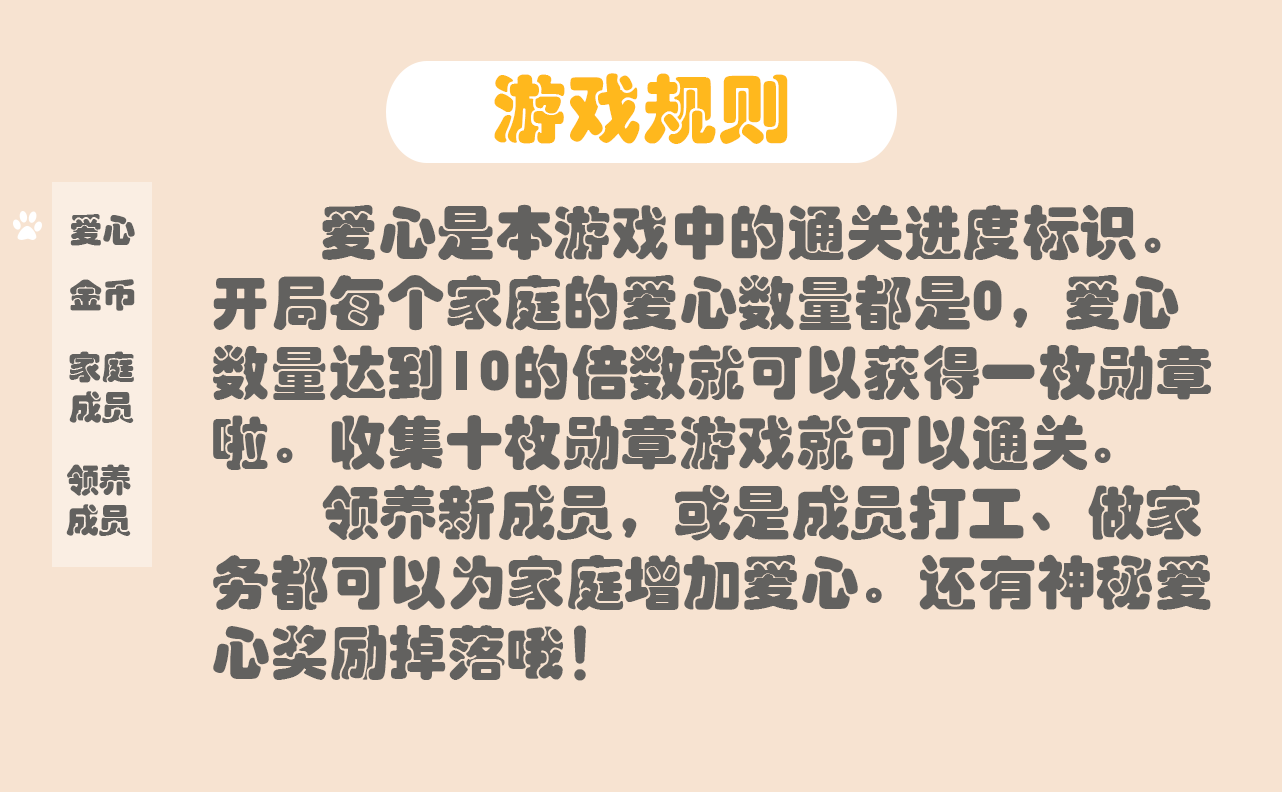
<style>
.page{position:relative;width:1282px;height:792px;background:#f7e3d1}
.page>*{position:absolute;margin:0}
.t1{font:75px "STHupo";color:#ffb81d}
.t2{font:58.3px "STHupo";color:#62615f}
.t3{font:33.3px "STHupo";color:#62615f}
</style>
<div class="page">
<p class="t1" style="left:494px;top:73px;width:294px;height:71px">游戏规则</p>
<p class="t2" style="left:212px;top:204px;width:1000px;height:477px">爱心是本游戏中的通关进度标识。开局每个家庭的爱心数量都是0，爱心数量达到10的倍数就可以获得一枚勋章啦。收集十枚勋章游戏就可以通关。<br>   领养新成员，或是成员打工、做家务都可以为家庭增加爱心。还有神秘爱心奖励掉落哦！</p>
<p class="t3" style="left:70px;top:214px;width:65px;height:32px">爱心</p>
<p class="t3" style="left:70px;top:279px;width:65px;height:32px">金币</p>
<p class="t3" style="left:69px;top:351px;width:65px;height:72px">家庭<br>成员</p>
<p class="t3" style="left:66px;top:464px;width:65px;height:72px">领养<br>成员</p>
</div>
